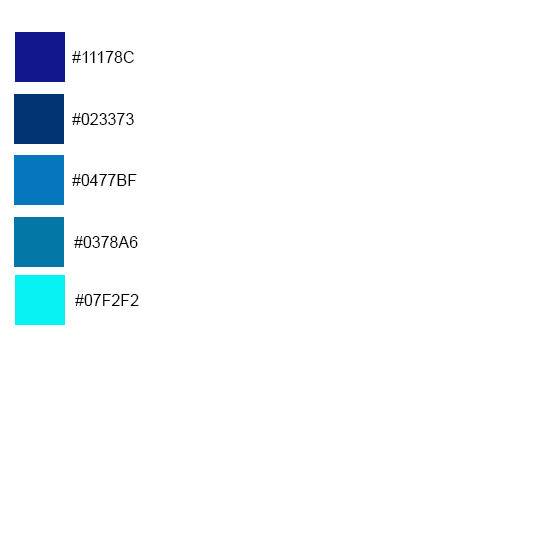
<style>
.page{position:relative;width:550px;height:550px;background:#ffffff}
.page>*{position:absolute;margin:0}
.t1{font:16px "ArialMT";color:#000000}
</style>
<div class="page">
<p class="t1" style="left:72px;top:51px;width:62px;height:12px">#11178C</p>
<p class="t1" style="left:72px;top:113px;width:62px;height:12px">#023373</p>
<p class="t1" style="left:72px;top:174px;width:65px;height:12px">#0477BF</p>
<p class="t1" style="left:74px;top:236px;width:64px;height:12px">#0378A6</p>
<p class="t1" style="left:75px;top:294px;width:64px;height:12px">#07F2F2</p>
</div>
